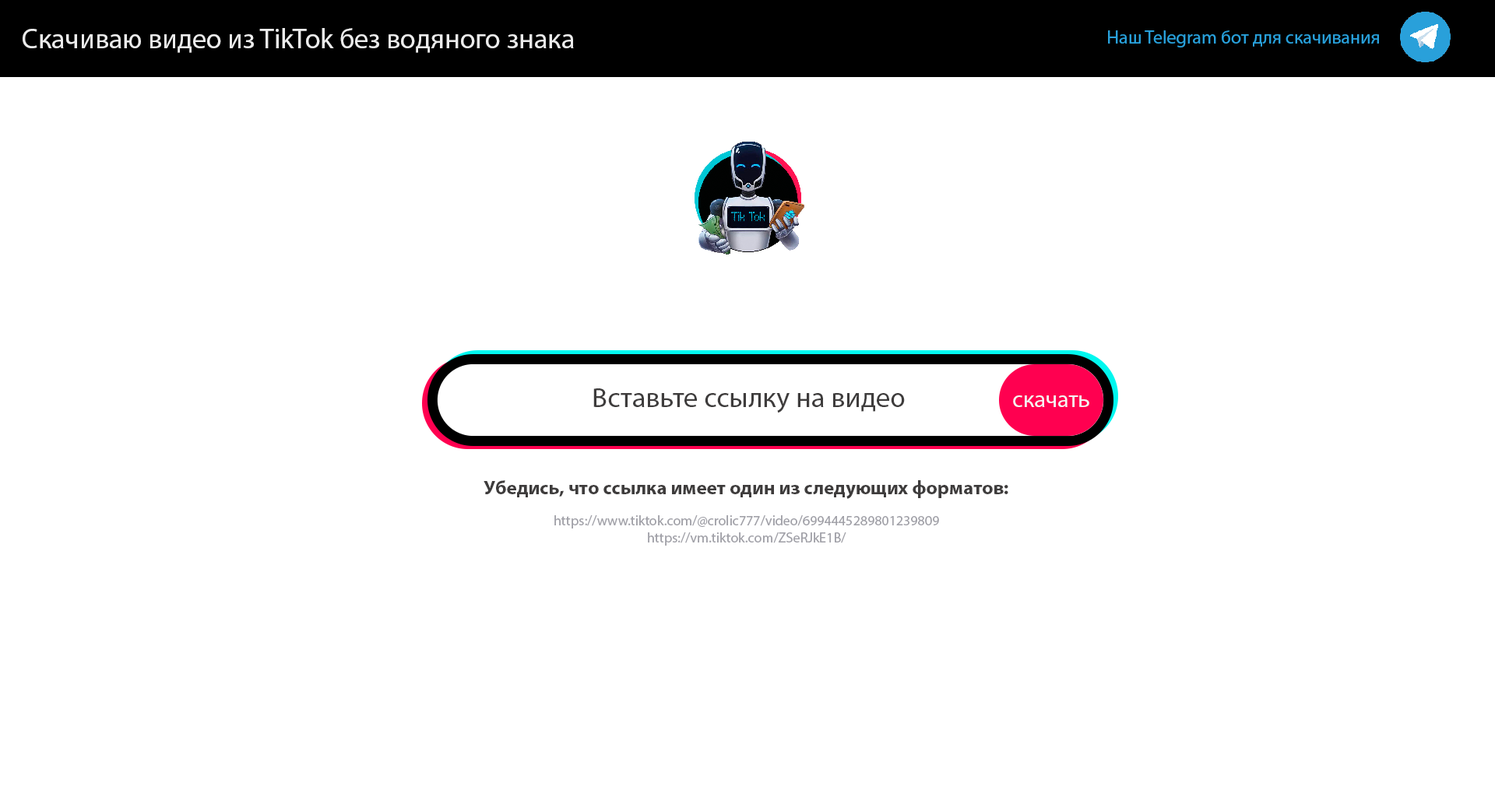
<style>
.page{position:relative;width:1495px;height:797px;background:#ffffff}
.page>*{position:absolute;margin:0}
.t1{font:28px "MyriadPro-Regular";color:#ececec}
.t2{font:18.7px "MyriadPro-Regular";color:#29a0da}
.t3{font:27.8px "MyriadPro-Regular";color:#3e3c3c}
.t4{font:23.4px "MyriadPro-Regular";color:#f5f5f5}
.t5{font:14px "MyriadPro-Regular";color:#a1a1a8}
.t6{font:19.5px "MyriadPro-Bold";color:#3e3c3c}
</style>
<div class="page">
<p class="t1" style="left:23px;top:28px;width:551px;height:25px">Скачиваю видео из TikTok без водяного знака</p>
<p class="t2" style="left:1108px;top:30px;width:271px;height:18px">Наш Telegram бот для скачивания</p>
<p class="t3" style="left:593px;top:389px;width:312px;height:25px">Вставьте ссылку на видео</p>
<p class="t4" style="left:1013px;top:396px;width:77px;height:11px">скачать</p>
<p class="t5" style="left:484px;top:481px;width:525px;height:65px;text-align:center"><span class="t6">Убедись, что ссылка имеет один из следующих форматов:<br><br></span>https://www.tiktok.com/@crolic777/video/6994445289801239809<br>https://vm.tiktok.com/ZSeRJkE1B/</p>
</div>
